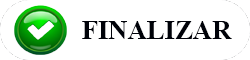
<style>
.page{position:relative;width:250px;height:60px;background:#ffffff}
.page>*{position:absolute;margin:0}
.t1{font:26.7px "TimesNewRomanPS-BoldMT";color:#000209}
</style>
<div class="page">
<p class="t1" style="left:82px;top:21px;width:150px;height:18px">FINALIZAR</p>
</div>
